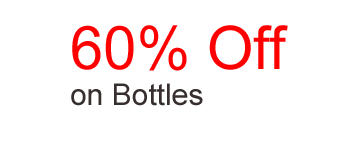
<style>
.page{position:relative;width:348px;height:143px;background:#ffffff}
.page>*{position:absolute;margin:0}
.t1{font:30px "ArialMT";color:#362f2d}
.t2{font:60px "ArialMT";color:#ff0000}
</style>
<div class="page">
<p class="t1" style="left:71px;top:25px;width:217px;height:81px"><span class="t2">60% Off <br></span>on Bottles</p>
</div>
